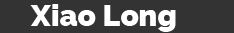
<style>
.page{position:relative;width:234px;height:33px;background:#333333}
.page>*{position:absolute;margin:0}
.t1{font:30px "Raleway-Heavy";color:#ffffff}
</style>
<div class="page">
<p class="t1" style="left:30px;top:4px;width:146px;height:28px">Xiao Long</p>
</div>
